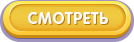
<style>
.page{position:relative;width:134px;height:42px}
.page>*{position:absolute;margin:0}
.t1{font:16px "RotondaC-Bold";letter-spacing:0.04em;color:#ffffff;text-transform:uppercase}
</style>
<div class="page">
<p class="t1" style="left:28px;top:12px;width:80px;height:12px">смотреть</p>
</div>
